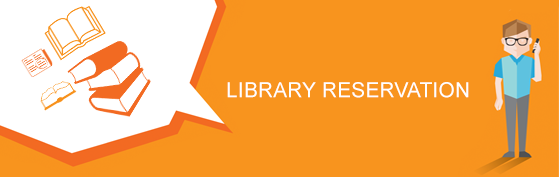
<style>
.page{position:relative;width:559px;height:177px;background:#f8941e}
.page>*{position:absolute;margin:0}
.t1{font:20.8px "ArialMT";letter-spacing:0.01em;color:#ffffff;text-transform:uppercase}
</style>
<div class="page">
<p class="t1" style="left:227px;top:82px;width:242px;height:16px">library reservation</p>
</div>
